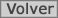
<style>
.page{position:relative;width:58px;height:18px;background:#cdcdcd}
.page>*{position:absolute;margin:0}
.t1{font:14.4px "Verdana";color:#444444;font-weight:bold}
</style>
<div class="page">
<p class="t1" style="left:6px;top:2px;width:48px;height:13px">Volver</p>
</div>
